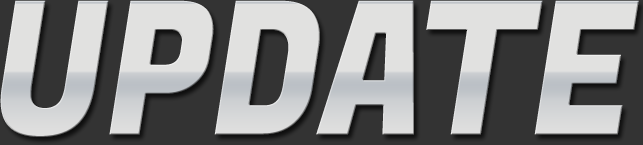
<style>
.page{position:relative;width:643px;height:145px;background:#333333}
.page>*{position:absolute;margin:0}
.t1{font:185.2px "FugazOne-Regular";color:#dfdfdf;scale:0.89 1}
</style>
<div class="page">
<p class="t1" style="left:0px;top:0px;width:639px;height:137px">UPDATE</p>
</div>
